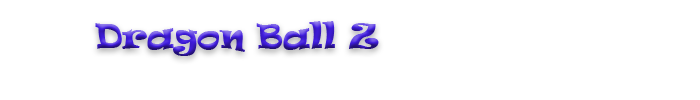
<style>
.page{position:relative;width:700px;height:100px;background:#ffffff}
.page>*{position:absolute;margin:0}
.t1{font:32px "Ravie"}
</style>
<div class="page">
<p class="t1" style="left:95px;top:21px;width:284px;height:35px">Dragon Ball Z</p>
</div>
